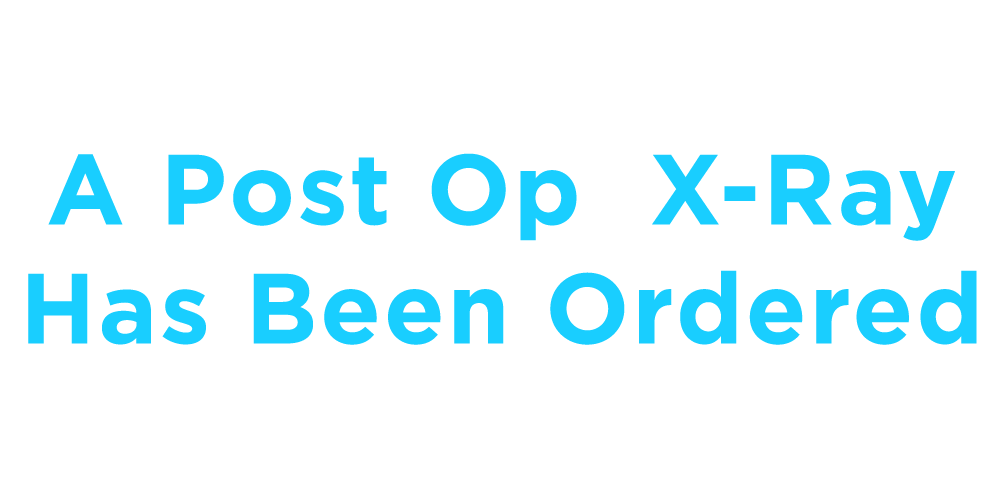
<style>
.page{position:relative;width:1000px;height:500px;background:#ffffff}
.page>*{position:absolute;margin:0}
.t1{font:99.2px "Gotham-Bold";letter-spacing:0.03em;color:#19ceff}
</style>
<div class="page">
<p class="t1" style="left:28px;top:153px;width:949px;height:192px;text-align:center">A Post Op  X-Ray<br>Has Been Ordered</p>
</div>
